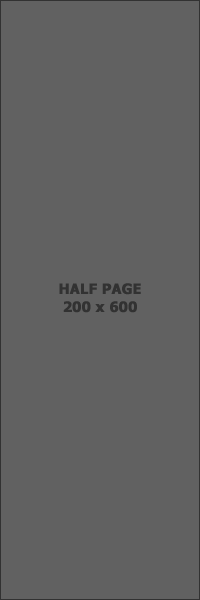
<style>
.page{position:relative;width:200px;height:600px;background:#616161}
.page>*{position:absolute;margin:0}
.t1{font:14px/18px "Tahoma-Bold";letter-spacing:0.01em;color:#323232;font-weight:bold}
</style>
<div class="page">
<p class="t1" style="left:59px;top:283px;width:82px;height:30px;text-align:center">HALF PAGE<br>200 x 600</p>
</div>
